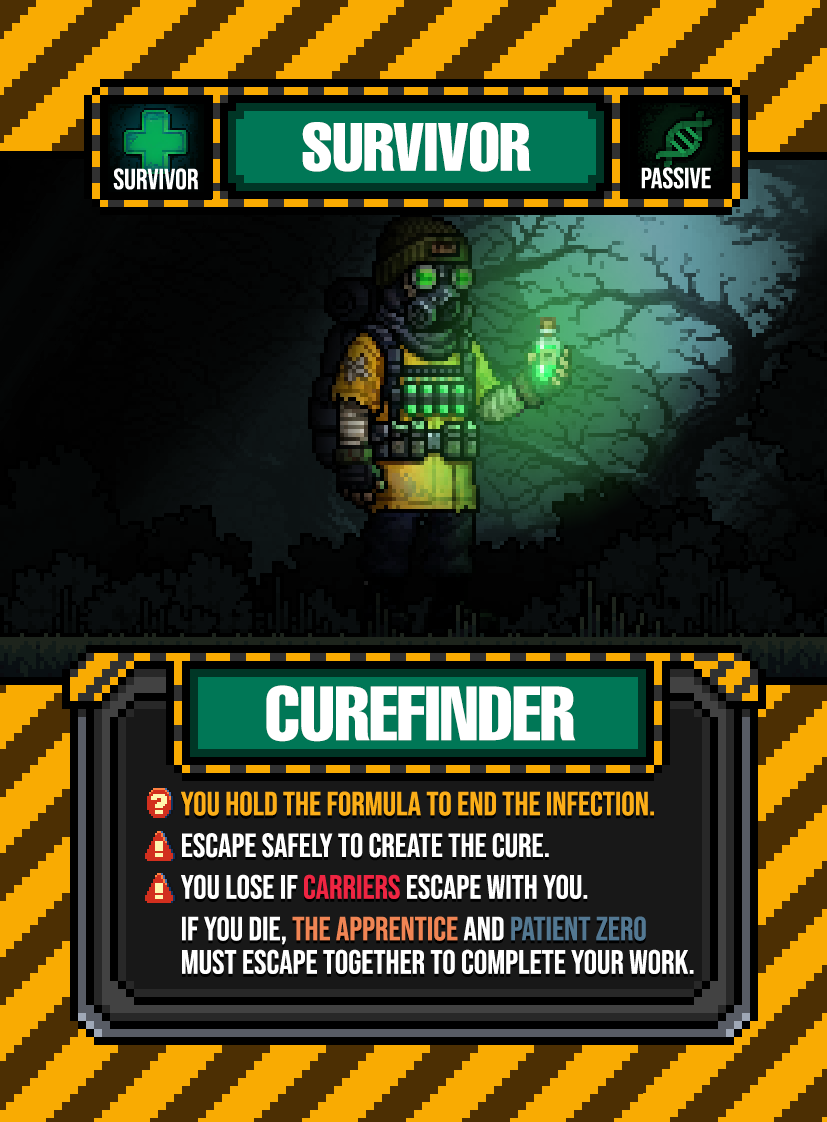
<style>
.page{position:relative;width:827px;height:1122px}
.page>*{position:absolute;margin:0}
.t1{font:66.7px "HelveticaLTPro-Compressed";color:#ffffff}
.t2{font:75px "HelveticaLTPro-Compressed";color:#ffffff}
.t3{font:33.3px/41.7px "BebasNeue-Regular";color:#ffffff}
.t4{font:33.3px/31.2px "BebasNeue-Regular";color:#fbae18}
.t5{font:33.3px/41.7px "BebasNeue-Regular";color:#ee2542}
.t6{font:33.3px/41.7px "BebasNeue-Regular";color:#f08554}
.t7{font:33.3px/33.3px "BebasNeue-Regular";color:#537892}
.t8{font:33.3px/33.3px "BebasNeue-Regular";color:#ffffff}
</style>
<div class="page">
<p class="t1" style="left:302px;top:122px;width:229px;height:50px">SURVIVOR</p>
<p class="t2" style="left:266px;top:685px;width:310px;height:57px">CUREFINDER</p>
<p class="t3" style="left:181px;top:791px;width:513px;height:183px"><span class="t4">You hold the formula to end the infection.<br></span>escape safely to create the cure.<br>you lose if <span class="t5">Carriers</span> escape with you.<br>If you DIE, <span class="t6">the Apprentice</span> and <span class="t7">Patient Zero </span><span class="t8">must escape together to complete your work.</span></p>
</div>
